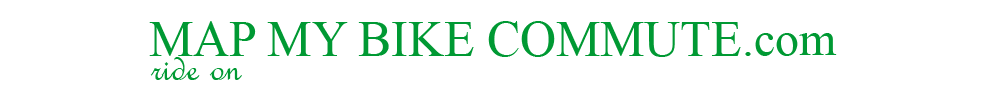
<style>
.page{position:relative;width:990px;height:100px;background:#ffffff}
.page>*{position:absolute;margin:0}
.t1{font:51px "TimesNewRomanPSMT";color:#009933}
.t2{font:48px "TimesNewRomanPSMT";color:#009933}
.t3{font:48px "FrenchScriptMT";color:#009933}
</style>
<div class="page">
<p class="t1" style="left:149px;top:21px;width:592px;height:36px">MAP MY BIKE COMMUTE</p>
<p class="t2" style="left:745px;top:33px;width:92px;height:23px">.com</p>
<p class="t3" style="left:150px;top:57px;width:92px;height:23px">ride on</p>
</div>
